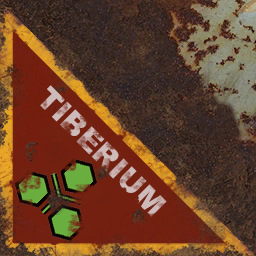
<style>
.page{position:relative;width:256px;height:256px}
.page>*{position:absolute;margin:0}
.t1{font:30px "Arial-Black";text-transform:uppercase}
</style>
<div class="page">
<p class="t1" style="left:40px;top:85px;width:127px;height:132px;rotate:45deg">TIBERIUM</p>
</div>
